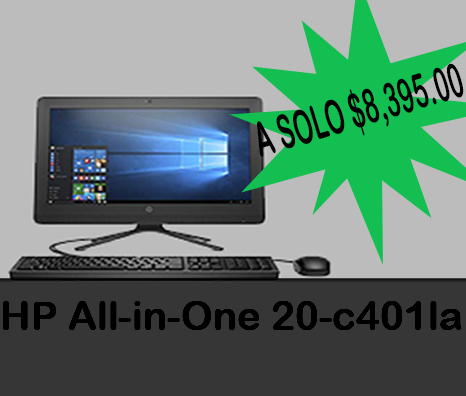
<style>
.page{position:relative;width:466px;height:396px;background:#bcbcbc}
.page>*{position:absolute;margin:0}
.t1{font:47.8px "ArialRoundedMTBold";color:#000000;scale:0.51 1}
.t2{font:40px "ArialRoundedMTBold";color:#000000}
</style>
<div class="page">
<p class="t1" style="left:257px;top:63px;width:207px;height:94px;rotate:-17deg">A SOLO $8,395.00</p>
<p class="t2" style="left:3px;top:301px;width:459px;height:29px">HP All-in-One 20-c401la</p>
</div>
